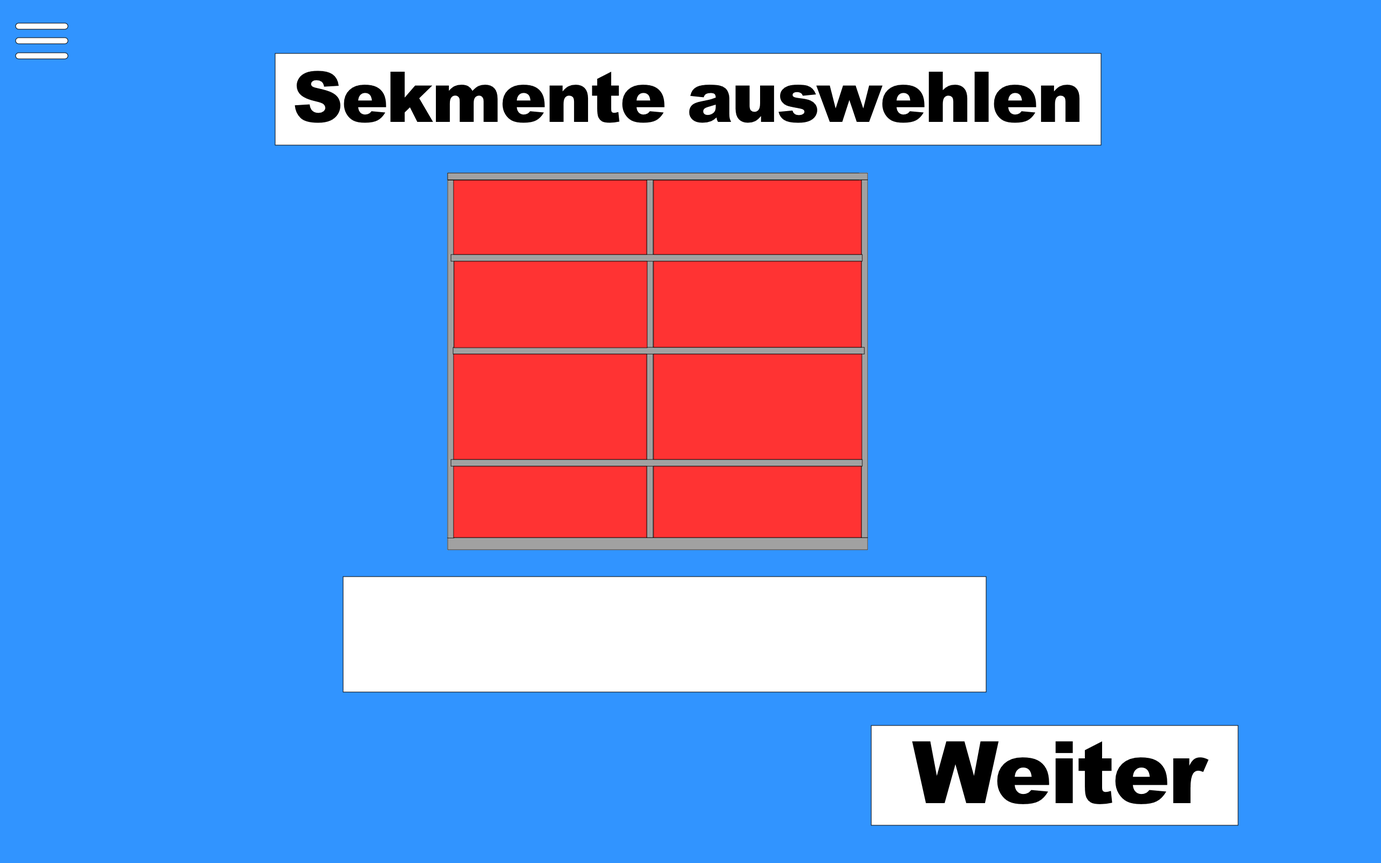
<style>
.page{position:relative;width:1381px;height:863px;background:#3194ff}
.page>*{position:absolute;margin:0}
.t1{font:70.1px "Arial-Black";letter-spacing:-0.024em;color:#000000}
.t2{font:86.3px "Arial-Black";letter-spacing:-0.024em;color:#000000}
</style>
<div class="page">
<p class="t1" style="left:295px;top:71px;width:785px;height:52px">Sekmente auswehlen</p>
<p class="t2" style="left:912px;top:741px;width:297px;height:63px">Weiter</p>
</div>
